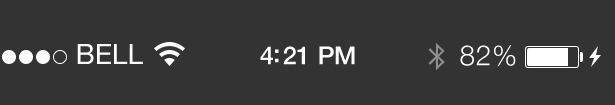
<style>
.page{position:relative;width:615px;height:105px;background:#333333}
.page>*{position:absolute;margin:0}
.t1{font:28px "HelveticaNeue";color:#ffffff;text-transform:uppercase}
.t2{font:25px "HelveticaNeue-Medium";letter-spacing:-0.02em;color:#ffffff}
.t3{font:28px "HelveticaNeue-Light";letter-spacing:0.025em;color:#ffffff}
</style>
<div class="page">
<p class="t1" style="left:77px;top:44px;width:66px;height:20px">Bell</p>
<p class="t2" style="left:260px;top:46px;width:95px;height:19px">4:21 PM</p>
<p class="t3" style="left:460px;top:45px;width:56px;height:22px">82%</p>
</div>
